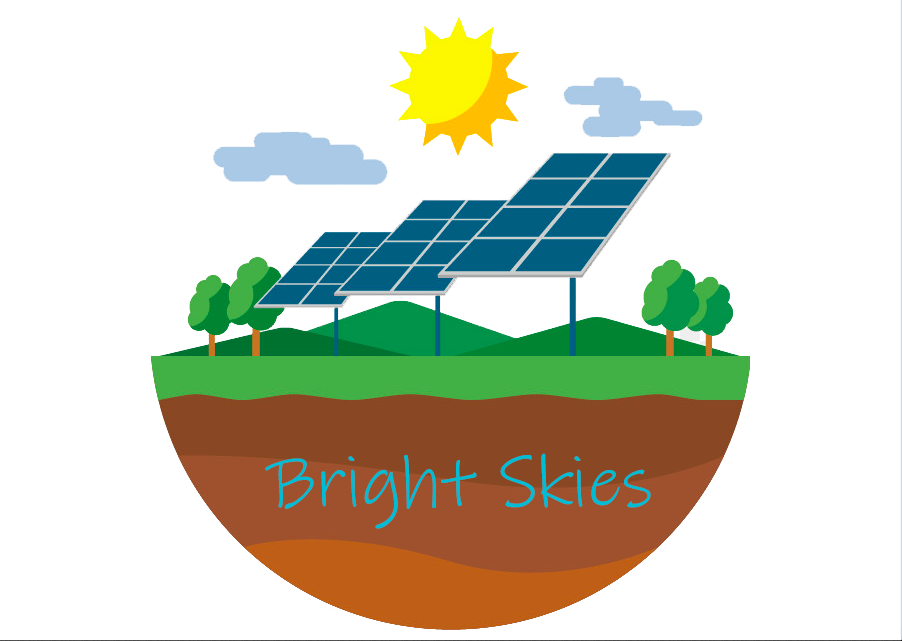
<style>
.page{position:relative;width:902px;height:641px;background:#ffffff}
.page>*{position:absolute;margin:0}
.t1{font:72px "InkFree";color:#00bcd4}
</style>
<div class="page">
<p class="t1" style="left:265px;top:453px;width:386px;height:76px">Bright Skies</p>
</div>
